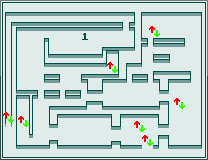
<style>
.page{position:relative;width:208px;height:160px;background:#dfecea}
.page>*{position:absolute;margin:0}
.t1{font:8px "PressStart2P-Regular";color:#054e47}
</style>
<div class="page">
<p class="t1" style="left:82px;top:33px;width:6px;height:7px">1</p>
</div>
